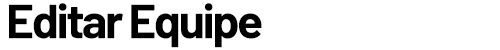
<style>
.page{position:relative;width:500px;height:50px;background:#ffffff}
.page>*{position:absolute;margin:0}
.t1{font:48px "Barlow-Bold";letter-spacing:-0.05em;color:#000000}
</style>
<div class="page">
<p class="t1" style="left:9px;top:3px;width:253px;height:45px">Editar Equipe</p>
</div>
